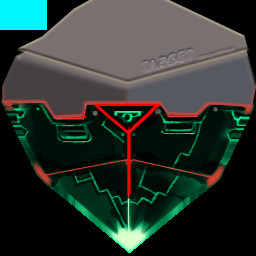
<style>
.page{position:relative;width:256px;height:256px;background:#000000}
.page>*{position:absolute;margin:0}
.t1{font:15px "Nasalization";letter-spacing:0.1em;color:#847c7c;scale:0.92 1}
</style>
<div class="page">
<p class="t1" style="left:142px;top:48px;width:92px;height:24px;rotate:-16deg">TARGET ____</p>
</div>
